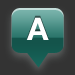
<style>
.page{position:relative;width:75px;height:75px;background:#333333}
.page>*{position:absolute;margin:0}
.t1{font:31.3px "HelveticaNeue-Bold";color:#ffffff}
</style>
<div class="page">
<p class="t1" style="left:26px;top:17px;width:23px;height:23px">A</p>
</div>
